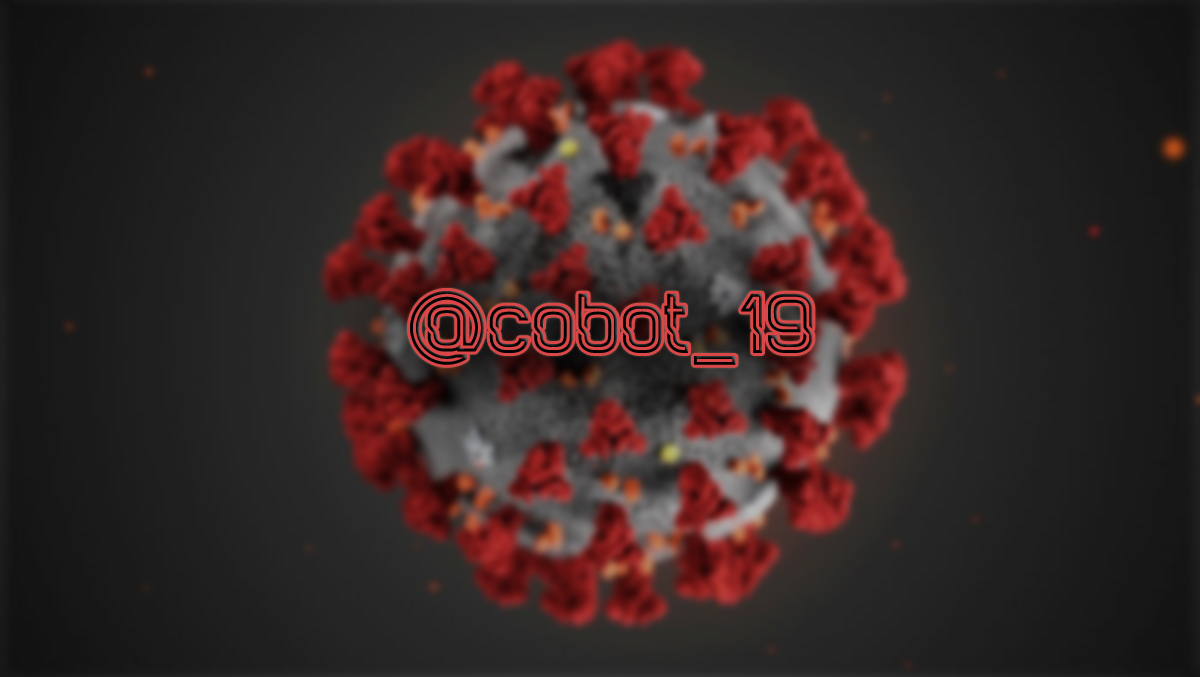
<style>
.page{position:relative;width:1200px;height:677px}
.page>*{position:absolute;margin:0}
.t1{font:71px "Sportrop-Regular";color:#000000}
</style>
<div class="page">
<p class="t1" style="left:409px;top:290px;width:404px;height:75px">@cobot_19</p>
</div>
